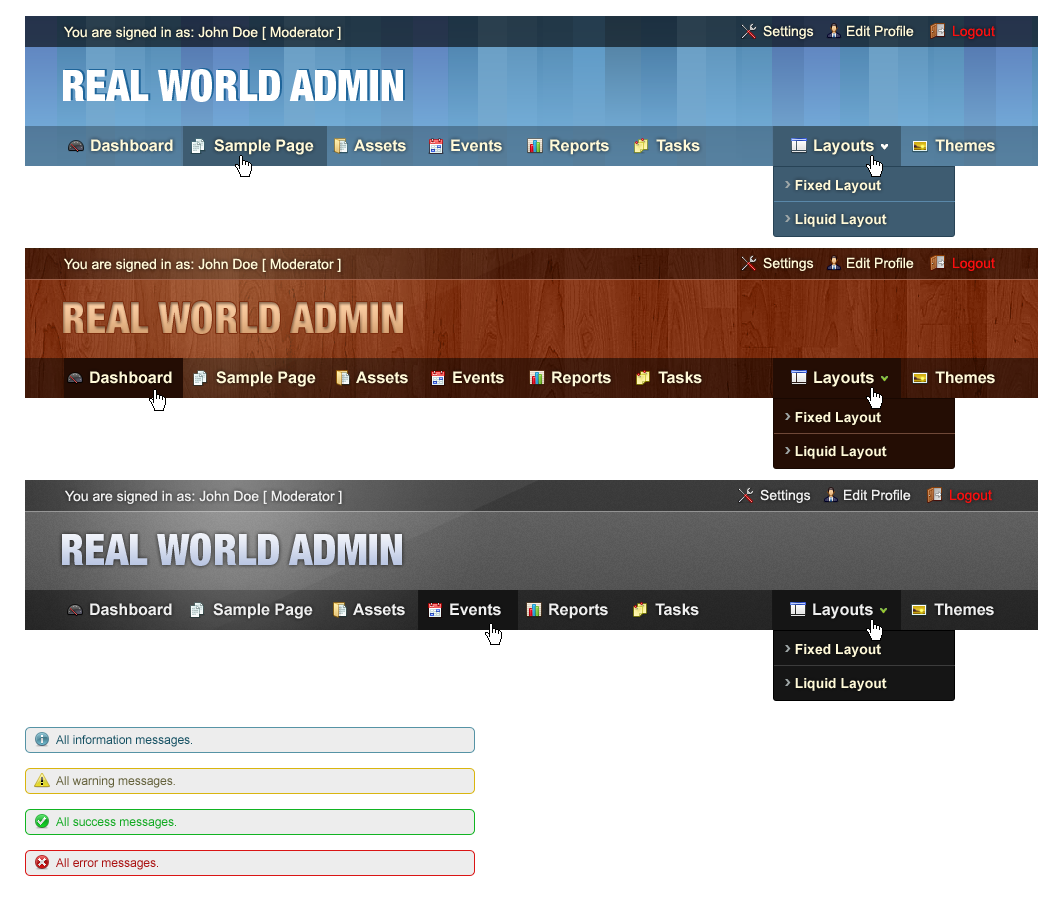
<style>
.page{position:relative;width:1063px;height:900px;background:#ffffff}
.page>*{position:absolute;margin:0}
.t1{font:14px "ArialMT";color:#fff9d7}
.t2{font:14px "ArialMT";color:#fff9d8}
.t3{font:14px "ArialMT";color:#fa0f0f}
.t4{font:16px "Arial-BoldMT";color:#fff9d8}
.t5{font:14px "Arial-BoldMT";color:#fff9d8}
.t6{font:14px "ArialMT";color:#efefef}
.t7{font:16px "Arial-BoldMT";color:#efefef}
.t8{font:12px "ArialMT";color:#165163}
.t9{font:12px "ArialMT";color:#625f39}
.t10{font:12px "ArialMT";color:#0fa91f}
.t11{font:12px "ArialMT";color:#aa1111}
</style>
<div class="page">
<p class="t1" style="left:64px;top:26px;width:277px;height:14px">You are signed in as: John Doe [ Moderator ]</p>
<p class="t2" style="left:763px;top:25px;width:51px;height:14px">Settings</p>
<p class="t2" style="left:847px;top:25px;width:67px;height:12px">Edit Profile</p>
<p class="t3" style="left:953px;top:25px;width:42px;height:14px">Logout</p>
<p class="t4" style="left:91px;top:139px;width:82px;height:13px">Dashboard</p>
<p class="t4" style="left:214px;top:139px;width:100px;height:16px">Sample Page</p>
<p class="t4" style="left:354px;top:139px;width:52px;height:13px">Assets</p>
<p class="t4" style="left:451px;top:139px;width:51px;height:13px">Events</p>
<p class="t4" style="left:550px;top:139px;width:59px;height:16px">Reports</p>
<p class="t4" style="left:656px;top:139px;width:44px;height:13px">Tasks</p>
<p class="t4" style="left:814px;top:139px;width:60px;height:16px">Layouts</p>
<p class="t4" style="left:935px;top:139px;width:60px;height:13px">Themes</p>
<p class="t5" style="left:795px;top:180px;width:86px;height:13px">Fixed Layout</p>
<p class="t5" style="left:795px;top:214px;width:92px;height:13px">Liquid Layout</p>
<p class="t2" style="left:763px;top:257px;width:51px;height:14px">Settings</p>
<p class="t2" style="left:847px;top:257px;width:67px;height:12px">Edit Profile</p>
<p class="t3" style="left:953px;top:257px;width:42px;height:14px">Logout</p>
<p class="t1" style="left:64px;top:258px;width:277px;height:14px">You are signed in as: John Doe [ Moderator ]</p>
<p class="t4" style="left:90px;top:371px;width:82px;height:13px">Dashboard</p>
<p class="t4" style="left:216px;top:371px;width:100px;height:16px">Sample Page</p>
<p class="t4" style="left:356px;top:371px;width:52px;height:13px">Assets</p>
<p class="t4" style="left:453px;top:371px;width:51px;height:13px">Events</p>
<p class="t4" style="left:552px;top:371px;width:59px;height:16px">Reports</p>
<p class="t4" style="left:658px;top:371px;width:44px;height:13px">Tasks</p>
<p class="t4" style="left:814px;top:371px;width:60px;height:16px">Layouts</p>
<p class="t4" style="left:935px;top:371px;width:60px;height:13px">Themes</p>
<p class="t5" style="left:795px;top:412px;width:86px;height:13px">Fixed Layout</p>
<p class="t5" style="left:795px;top:446px;width:92px;height:13px">Liquid Layout</p>
<p class="t6" style="left:65px;top:490px;width:277px;height:14px">You are signed in as: John Doe [ Moderator ]</p>
<p class="t6" style="left:760px;top:489px;width:51px;height:14px">Settings</p>
<p class="t6" style="left:844px;top:489px;width:67px;height:12px">Edit Profile</p>
<p class="t3" style="left:950px;top:489px;width:42px;height:14px">Logout</p>
<p class="t7" style="left:90px;top:603px;width:82px;height:13px">Dashboard</p>
<p class="t7" style="left:213px;top:603px;width:100px;height:16px">Sample Page</p>
<p class="t7" style="left:353px;top:603px;width:52px;height:13px">Assets</p>
<p class="t7" style="left:450px;top:603px;width:51px;height:13px">Events</p>
<p class="t7" style="left:549px;top:603px;width:59px;height:16px">Reports</p>
<p class="t7" style="left:655px;top:603px;width:44px;height:13px">Tasks</p>
<p class="t7" style="left:813px;top:603px;width:60px;height:16px">Layouts</p>
<p class="t7" style="left:934px;top:603px;width:60px;height:13px">Themes</p>
<p class="t5" style="left:795px;top:644px;width:86px;height:13px">Fixed Layout</p>
<p class="t5" style="left:795px;top:678px;width:92px;height:13px">Liquid Layout</p>
<p class="t8" style="left:56px;top:735px;width:136px;height:12px">All information messages.</p>
<p class="t9" style="left:56px;top:776px;width:119px;height:12px">All warning messages.</p>
<p class="t10" style="left:56px;top:817px;width:120px;height:12px">All success messages.</p>
<p class="t11" style="left:56px;top:858px;width:102px;height:12px">All error messages.</p>
</div>
